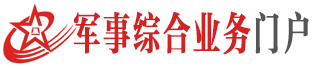
<style>
.page{position:relative;width:313px;height:69px;background:#ffffff}
.page>*{position:absolute;margin:0}
.t1{font:45.9px "FZCYSCK--GBK1-0";letter-spacing:0.05em;color:#d42222;font-weight:bold;scale:0.79 1}
.t2{font:45.9px "FZCYSCK--GBK1-0";letter-spacing:0.05em;color:#555555;font-weight:bold;scale:0.79 1}
</style>
<div class="page">
<p class="t1" style="left:73px;top:11px;width:236px;height:44px">军事综合业务<span class="t2">门户</span></p>
</div>
